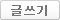
<style>
.page{position:relative;width:60px;height:20px;background:#ffffff}
.page>*{position:absolute;margin:0}
.t1{font:12px "Dotum";color:#757575;font-weight:bold}
</style>
<div class="page">
<p class="t1" style="left:11px;top:5px;width:36px;height:11px">글쓰기</p>
</div>
